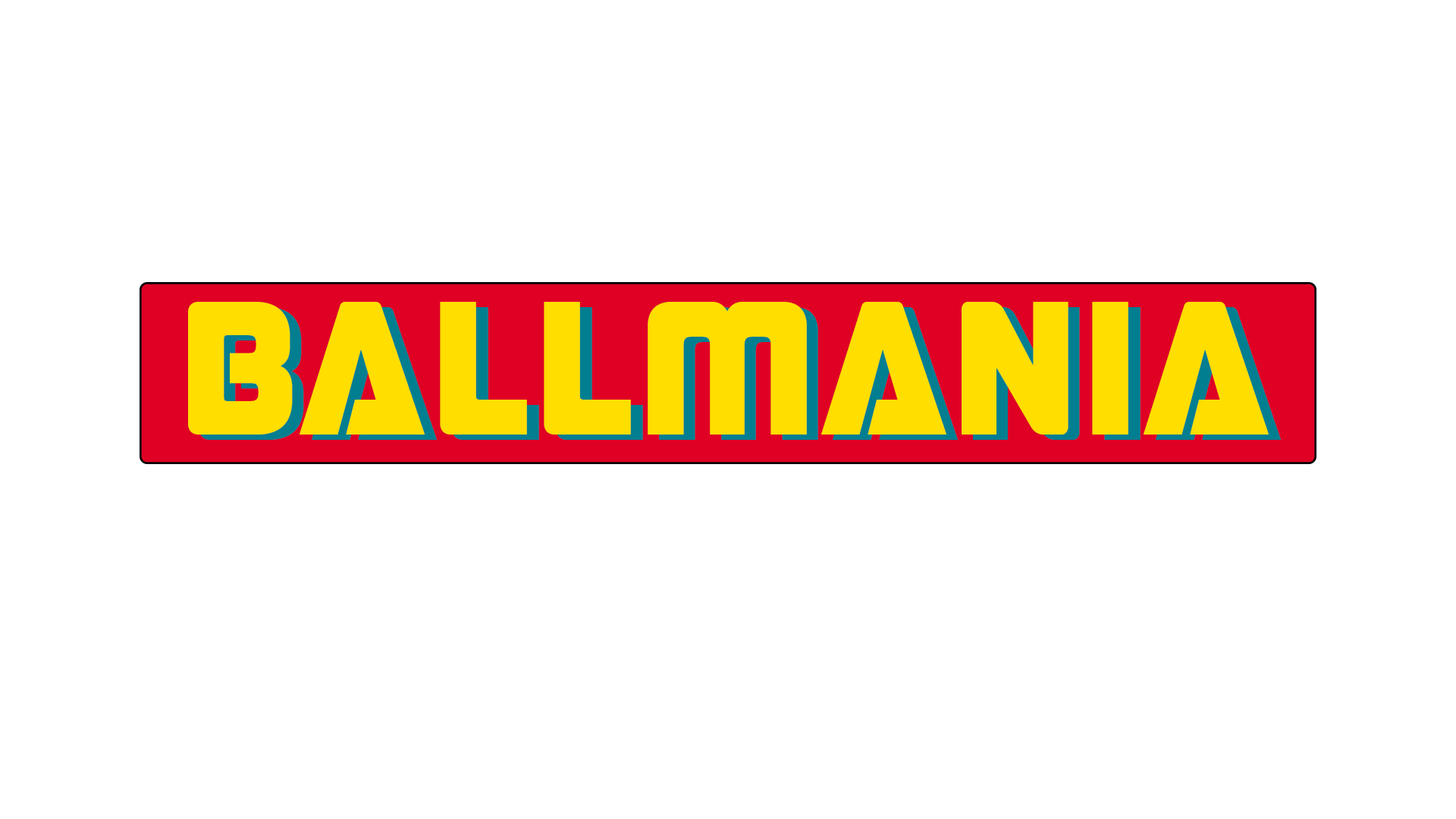
<style>
.page{position:relative;width:1456px;height:819px;background:#ffffff}
.page>*{position:absolute;margin:0}
.t1{font:189.6px "Stormfaze-Regular";color:#ffde00}
</style>
<div class="page">
<p class="t1" style="left:188px;top:302px;width:1081px;height:133px">BALLMANIA</p>
<p class="t1" style="left:199px;top:307px;width:1082px;height:133px">BALLMANIA</p>
</div>
